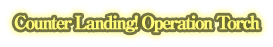
<style>
.page{position:relative;width:273px;height:47px;background:#ffffff}
.page>*{position:absolute;margin:0}
.t1{font:18px "RyuminPro-ExBold";letter-spacing:-0.12em;color:#fffa79;font-weight:bold}
</style>
<div class="page">
<p class="t1" style="left:14px;top:15px;width:246px;height:18px">Counter Landing! Operation Torch</p>
</div>
